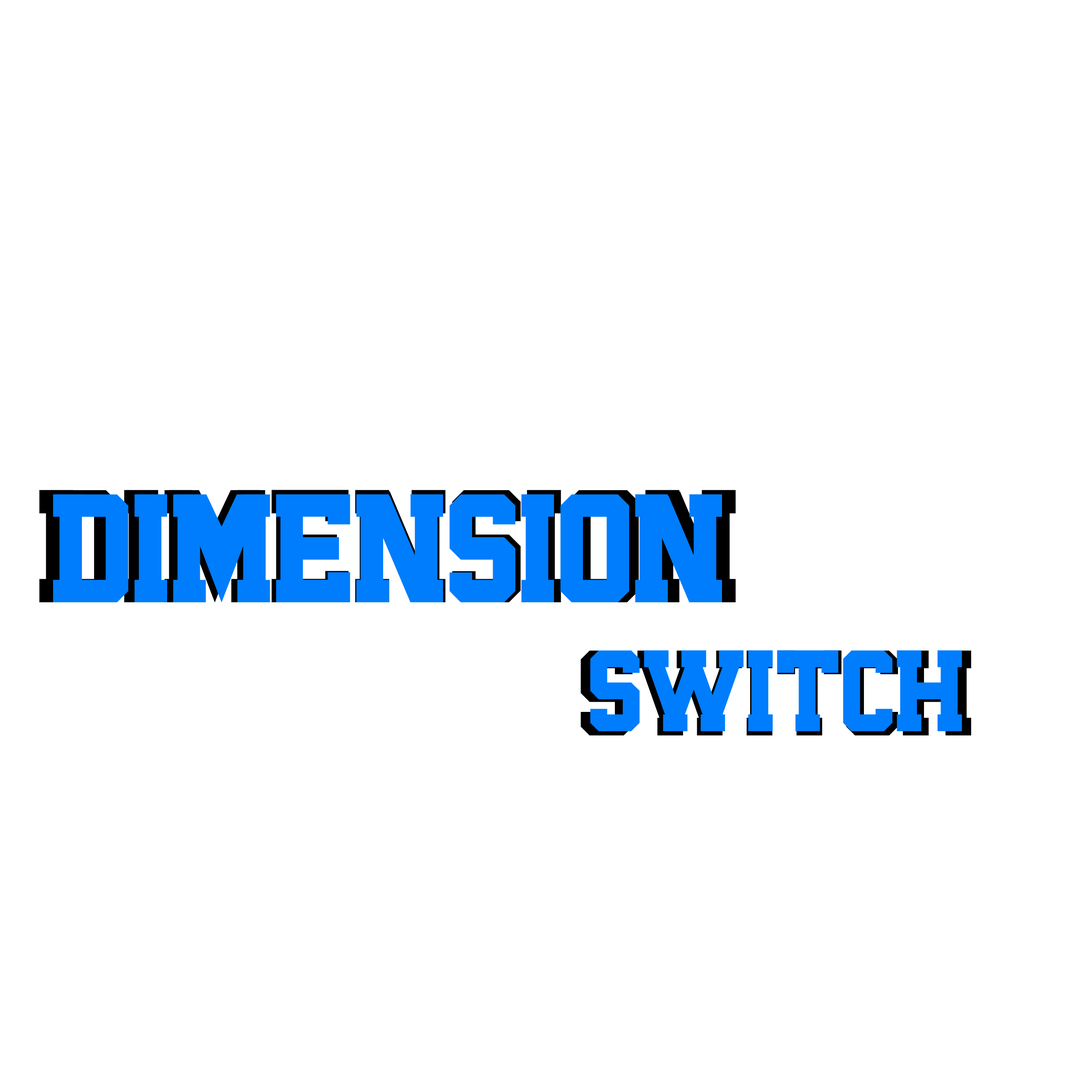
<style>
.page{position:relative;width:1092px;height:1092px;background:#ffffff}
.page>*{position:absolute;margin:0}
.t1{font:174.3px "CollegeGamesDemoRegular";color:#007dfc;text-transform:uppercase}
.t2{font:167.6px "CollegeGamesDemoRegular";color:#007dfc;text-transform:uppercase}
</style>
<div class="page">
<p class="t1" style="left:39px;top:490px;width:697px;height:112px">Dimension</p>
<p class="t2" style="left:53px;top:494px;width:669px;height:108px">Dimension</p>
</div>
